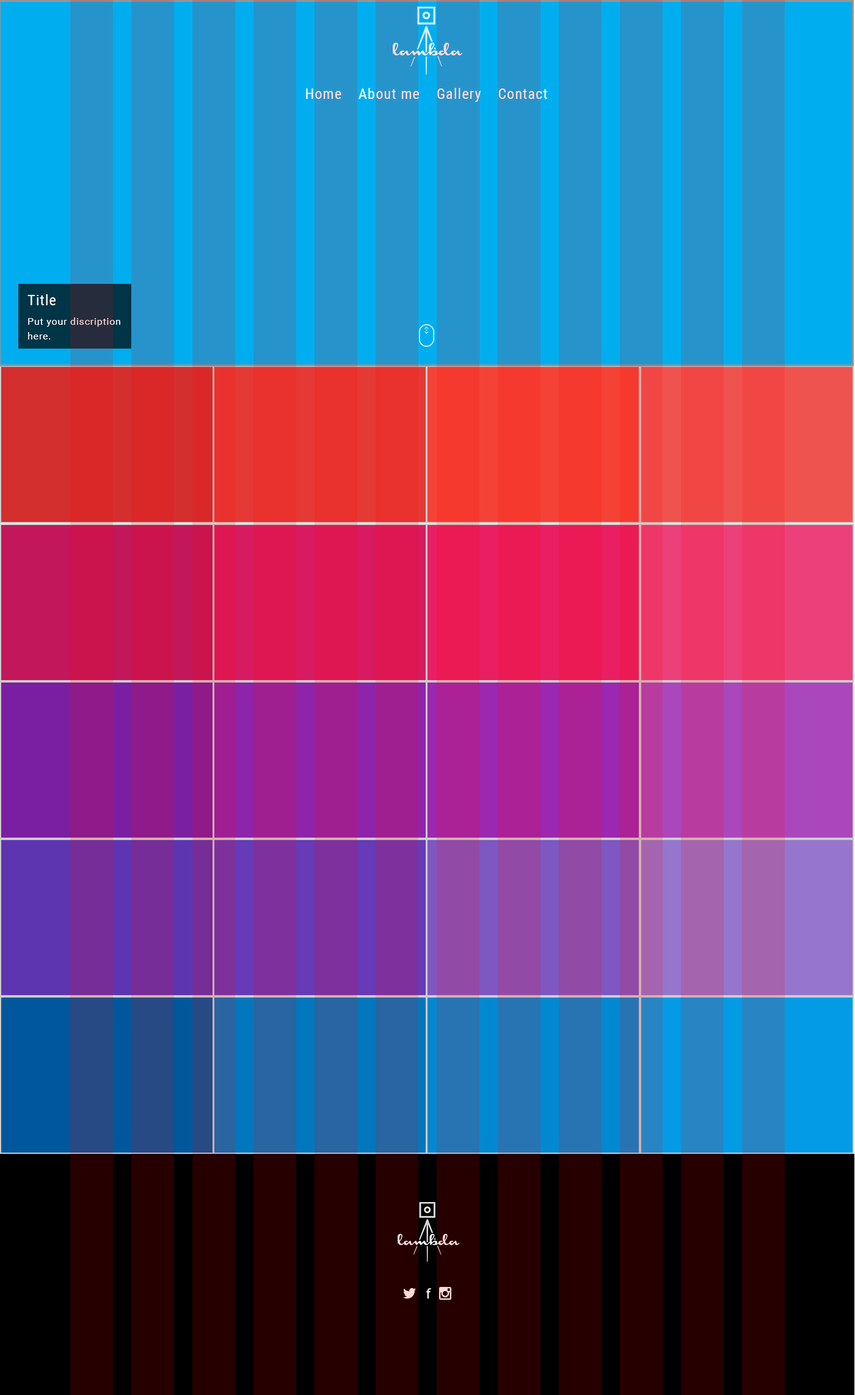
<style>
.page{position:relative;width:855px;height:1395px}
.page>*{position:absolute;margin:0}
.t1{font:14.7px "RobotoCondensed-Regular";letter-spacing:0.05em;color:#ffd9d9}
.t2{font:14.7px "RobotoCondensed-Regular";letter-spacing:0.05em;color:#ffffff}
.t3{font:9.8px/14.7px "Roboto-Regular";letter-spacing:0.05em;color:#ffffff}
.t4{font:9.8px/3.7px "Roboto-Regular";letter-spacing:0.05em;color:#ffffff}
</style>
<div class="page">
<p class="t1" style="left:306px;top:88px;width:241px;height:14px">Home    About me    Gallery    Contact</p>
<p class="t2" style="left:27px;top:294px;width:29px;height:11px">Title</p>
<p class="t3" style="left:28px;top:317px;width:92px;height:22px"><span class="t4">Put your </span>discription here.</p>
</div>
